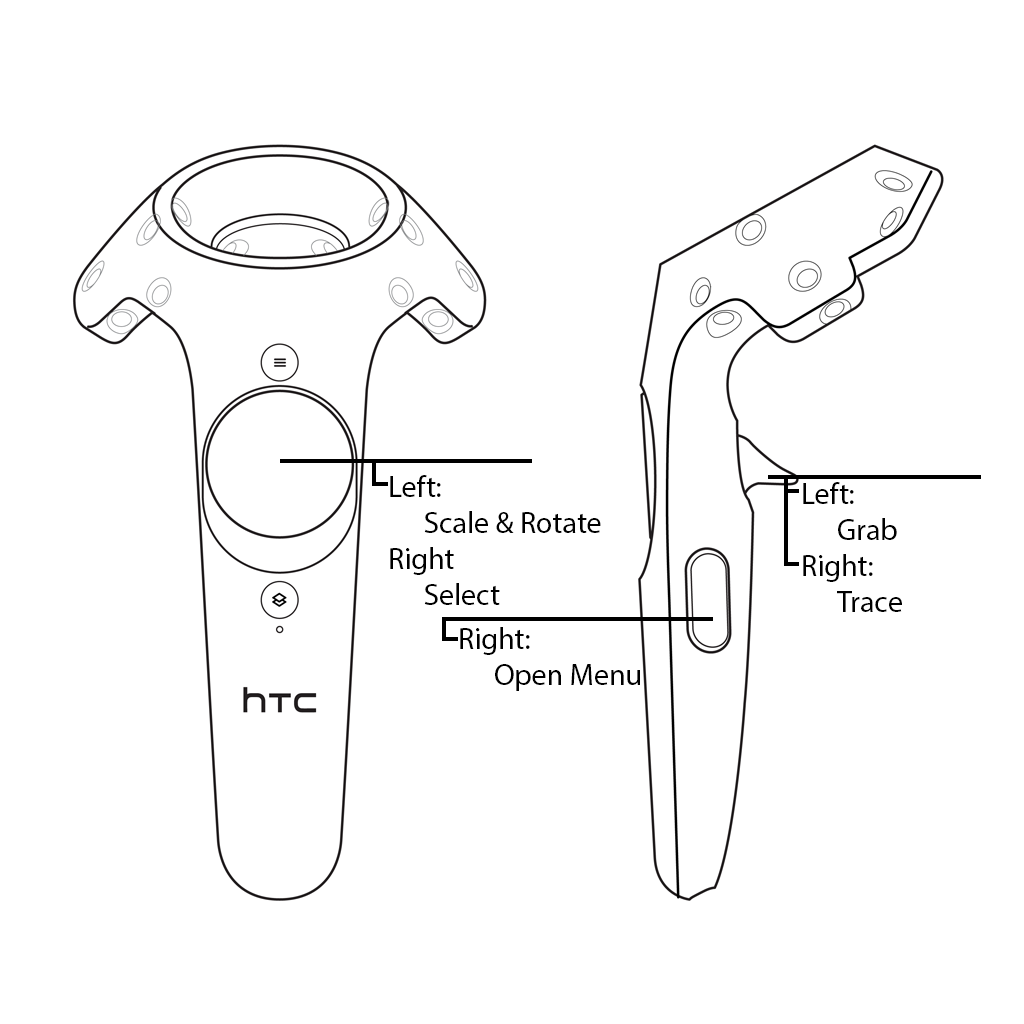
<style>
.page{position:relative;width:1024px;height:1024px;background:#ffffff}
.page>*{position:absolute;margin:0}
.t1{font:30px "MyriadPro-Regular";color:#000000}
</style>
<div class="page">
<p class="t1" style="left:390px;top:475px;width:211px;height:130px">Left: <br> Scale &amp; Rotate<br>Right<br> Select</p>
<p class="t1" style="left:803px;top:482px;width:99px;height:130px">Left: <br> Grab<br>Right:<br> Trace</p>
<p class="t1" style="left:460px;top:627px;width:180px;height:64px">Right:<br> Open Menu</p>
</div>
